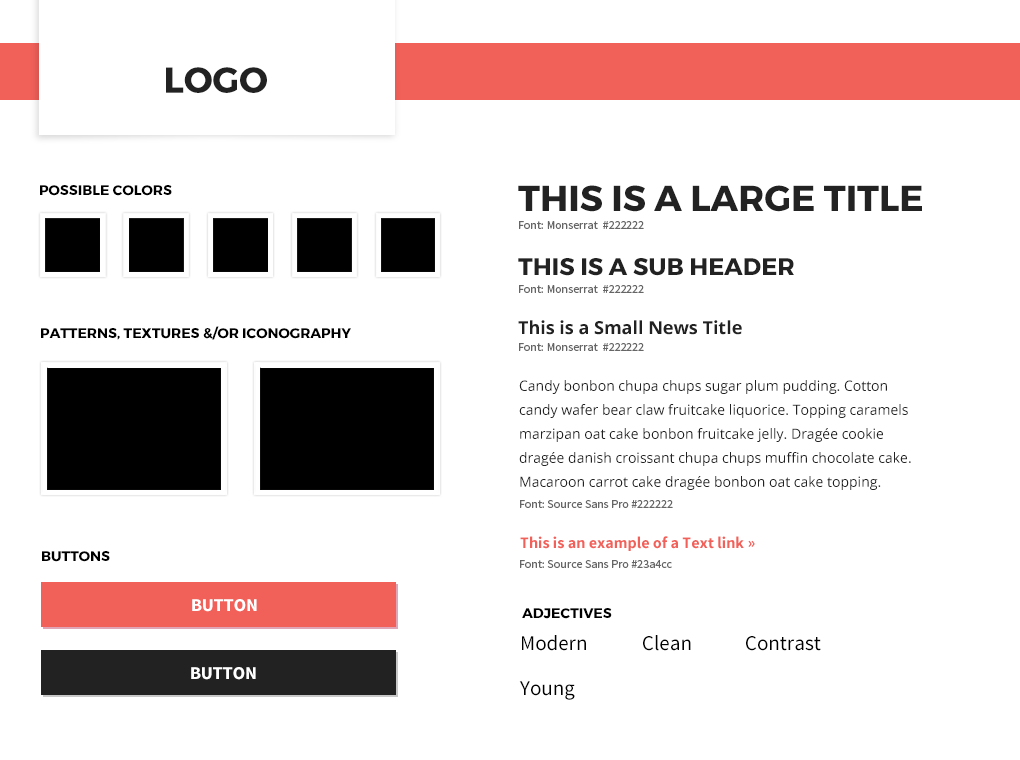
<style>
.page{position:relative;width:1020px;height:760px;background:#ffffff}
.page>*{position:absolute;margin:0}
.t1{font:36px "Montserrat-Bold";color:#222222;text-transform:uppercase}
.t2{font:14px "Montserrat-Bold";color:#000000;text-transform:uppercase}
.t3{font:12px "SourceSansPro-Regular";color:#666666}
.t4{font:24px "Montserrat-Bold";color:#222222;text-transform:uppercase}
.t5{font:14px "Montserrat-Bold";color:#000000}
.t6{font:18px "OpenSans-Bold";color:#222222}
.t7{font:14px/24px "OpenSans";color:#222222}
.t8{font:16px "SourceSansPro-Bold";color:#f16059}
.t9{font:18px "SourceSansPro-Bold";color:#ffffff}
.t10{font:21px "SourceSansPro-Regular";color:#000000}
</style>
<div class="page">
<p class="t1" style="left:166px;top:67px;width:101px;height:26px">Logo</p>
<p class="t2" style="left:40px;top:185px;width:132px;height:11px">Possible Colors</p>
<p class="t1" style="left:518px;top:185px;width:404px;height:27px">This is a Large Title</p>
<p class="t3" style="left:519px;top:221px;width:125px;height:8px">Font: Monserrat  #222222</p>
<p class="t4" style="left:518px;top:258px;width:276px;height:18px">This is a Sub Header</p>
<p class="t3" style="left:519px;top:285px;width:125px;height:8px">Font: Monserrat  #222222</p>
<p class="t5" style="left:41px;top:326px;width:310px;height:14px">PATTERNS, TEXTURES &amp;/OR ICONOGRAPHY</p>
<p class="t6" style="left:518px;top:320px;width:224px;height:15px">This is a Small News Title</p>
<p class="t3" style="left:519px;top:343px;width:125px;height:8px">Font: Monserrat  #222222</p>
<p class="t7" style="left:519px;top:380px;width:392px;height:110px">Candy bonbon chupa chups sugar plum pudding. Cotton candy wafer bear claw fruitcake liquorice. Topping caramels marzipan oat cake bonbon fruitcake jelly. Dragée cookie dragée danish croissant chupa chups muffin chocolate cake. Macaroon carrot cake dragée bonbon oat cake topping.</p>
<p class="t3" style="left:520px;top:500px;width:153px;height:8px">Font: Source Sans Pro #222222</p>
<p class="t8" style="left:520px;top:536px;width:235px;height:15px">This is an example of a Text link »</p>
<p class="t5" style="left:42px;top:551px;width:68px;height:11px">BUTTONS</p>
<p class="t3" style="left:520px;top:560px;width:152px;height:8px">Font: Source Sans Pro #23a4cc</p>
<p class="t9" style="left:192px;top:599px;width:65px;height:13px">BUTTON</p>
<p class="t2" style="left:522px;top:608px;width:90px;height:11px">Adjectives</p>
<p class="t10" style="left:522px;top:635px;width:64px;height:16px">Modern</p>
<p class="t10" style="left:643px;top:635px;width:48px;height:16px">Clean</p>
<p class="t10" style="left:746px;top:636px;width:75px;height:15px">Contrast</p>
<p class="t9" style="left:191px;top:667px;width:65px;height:13px">BUTTON</p>
<p class="t10" style="left:519px;top:681px;width:56px;height:19px">Young</p>
</div>
